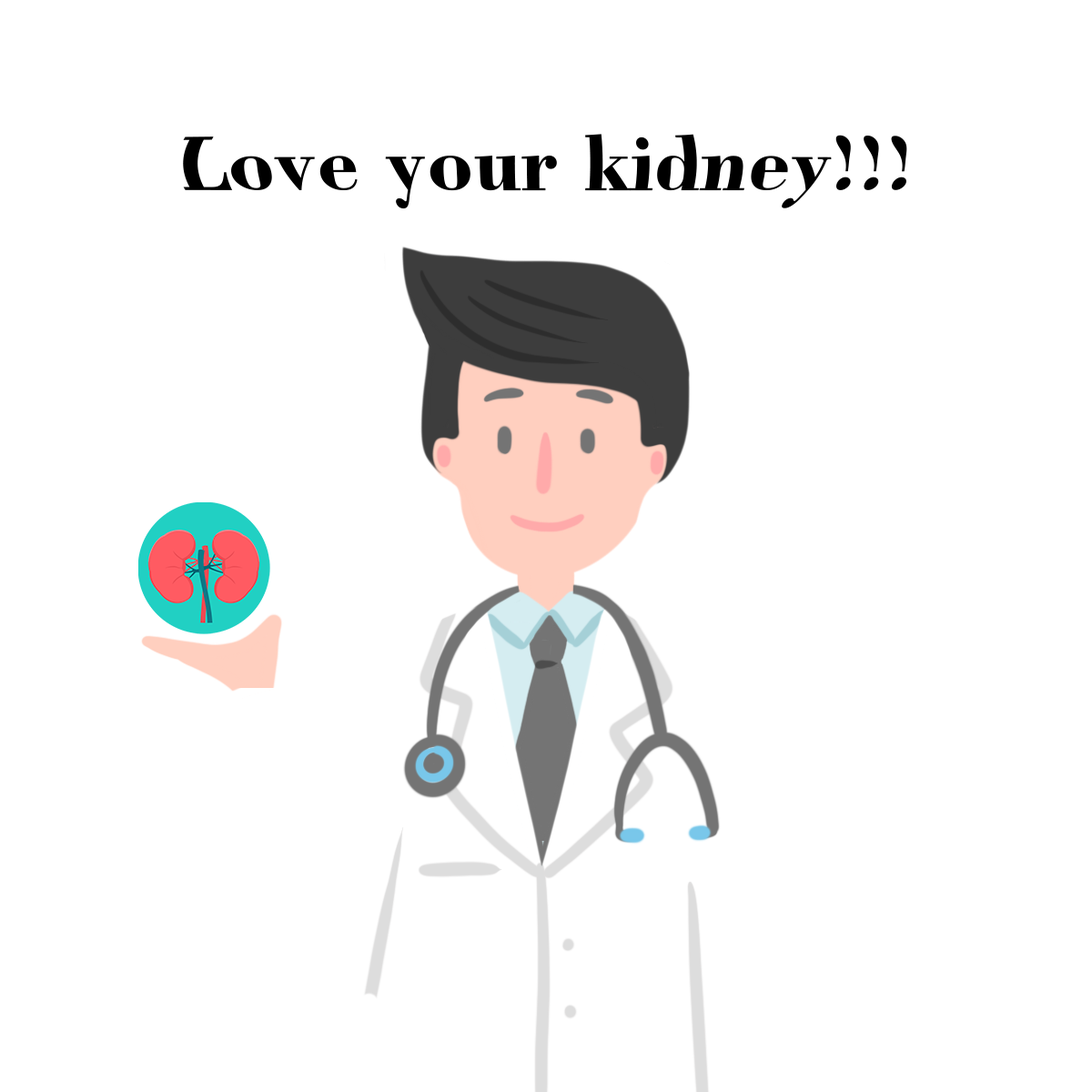
<style>
.page{position:relative;width:1092px;height:1092px;background:#ffffff}
.page>*{position:absolute;margin:0}
.t1{font:75.8px "BodoniBT-Bold";color:#000000}
</style>
<div class="page">
<p class="t1" style="left:183px;top:134px;width:724px;height:75px">Love your kidney!!!</p>
</div>
